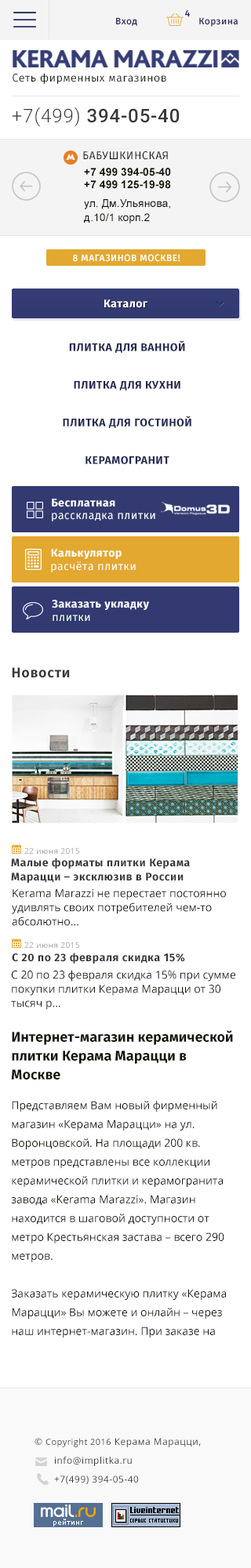
<style>
.page{position:relative;width:251px;height:1568px;background:#ffffff}
.page>*{position:absolute;margin:0}
.t1{font:9.4px "FiraSans-Medium";letter-spacing:0.04em;color:#292f60}
.t2{font:11px "FiraSans-Book";letter-spacing:0.04em;color:#151408}
.t3{font:18.8px "Roboto-Medium";letter-spacing:0.04em;color:#383838;text-transform:uppercase}
.t4{font:18.8px "Roboto-Light";letter-spacing:0.04em;color:#383838;text-transform:uppercase}
.t5{font:11px "FiraSans-Regular";letter-spacing:0.04em;color:#151408;text-transform:uppercase}
.t6{font:11px/8.5px "Arial-BoldMT";color:#151408;text-transform:uppercase}
.t7{font:11px/12.5px "Arial-BoldMT";color:#151408;text-transform:uppercase}
.t8{font:11px/18.8px "ArialMT";color:#151408}
.t9{font:11px/14.1px "ArialMT";color:#151408}
.t10{font:9.4px "FiraSans-Medium";letter-spacing:0.04em;color:#ffffff;text-transform:uppercase}
.t11{font:11px "FiraSans-Bold";letter-spacing:0.04em;color:#ffffff}
.t12{font:11px/37.6px "FiraSans-Bold";letter-spacing:0.04em;color:#222750;text-transform:uppercase}
.t13{font:11px "FiraSans-Regular";letter-spacing:0.04em;color:#ffffff}
.t14{font:14.1px "FiraSans-Bold";letter-spacing:0.04em;color:#383838}
.t15{font:11px/14.1px "FiraSans-Bold";letter-spacing:0.04em;color:#383838}
.t16{font:7.8px "OpenSans";letter-spacing:0.04em;color:#a0a2a2}
.t17{font:11px/14.1px "OpenSans";color:#151408}
.t18{font:11px "FiraSans-Bold";letter-spacing:0.04em;color:#383838}
.t19{font:11px/18.8px "OpenSans";color:#151408}
.t20{font:14.1px/18.8px "FiraSans-Bold";color:#151408}
.t21{font:9.4px "OpenSans";letter-spacing:0.04em;color:#383838}
.t22{font:8.6px "OpenSans";letter-spacing:0.04em;color:#383838}
.t23{font:9.4px/18.8px "OpenSans";letter-spacing:0.04em;color:#383838}
</style>
<div class="page">
<p class="t1" style="left:116px;top:17px;width:21px;height:9px">Вход</p>
<p class="t1" style="left:185px;top:9px;width:5px;height:7px">4</p>
<p class="t1" style="left:199px;top:17px;width:39px;height:10px">Корзина</p>
<p class="t2" style="left:13px;top:73px;width:153px;height:11px">Сеть фирменных магазинов</p>
<p class="t3" style="left:12px;top:107px;width:168px;height:20px"><span class="t4">+7(499) </span>394-05-40</p>
<p class="t5" style="left:83px;top:151px;width:85px;height:9px">БАБУШКИНСКАЯ</p>
<p class="t6" style="left:84px;top:168px;width:87px;height:55px">+7 499 394-05-40 <br><span class="t7">+7 499 125-19-98<br></span><span class="t8">ул. Дм.Ульянова, <br></span><span class="t9">д.10/1 корп.2</span></p>
<p class="t10" style="left:73px;top:254px;width:107px;height:8px">8 магазинов Москве!</p>
<p class="t11" style="left:104px;top:299px;width:43px;height:9px">Каталог</p>
<p class="t12" style="left:63px;top:340px;width:128px;height:124px;text-align:center">Плитка для ванной           <br>Плитка для кухни           <br>Плитка для гостиной<br>Керамогранит</p>
<p class="t11" style="left:52px;top:499px;width:63px;height:8px">Бесплатная</p>
<p class="t13" style="left:52px;top:513px;width:103px;height:8px">расскладка плитки</p>
<p class="t11" style="left:51px;top:549px;width:71px;height:10px">Калькулятор</p>
<p class="t13" style="left:51px;top:561px;width:85px;height:11px">расчёта плитки</p>
<p class="t11" style="left:52px;top:600px;width:97px;height:10px">Заказать укладку</p>
<p class="t13" style="left:53px;top:615px;width:37px;height:7px">плитки</p>
<p class="t14" style="left:12px;top:667px;width:58px;height:11px">Новости</p>
<p class="t15" style="left:11px;top:858px;width:179px;height:25px">Малые форматы плитки Керама <br>Марацци – эксклюзив в России</p>
<p class="t16" style="left:24px;top:848px;width:55px;height:6px">22 июня 2015</p>
<p class="t17" style="left:12px;top:889px;width:214px;height:37px">Kerama Marazzi не перестает постоянно удивлять своих потребителей чем-то абсолютно...</p>
<p class="t16" style="left:24px;top:942px;width:55px;height:6px">22 июня 2015</p>
<p class="t18" style="left:12px;top:953px;width:173px;height:11px">С 20 по 23 февраля скидка 15%</p>
<p class="t17" style="left:11px;top:970px;width:224px;height:40px">С 20 по 23 февраля скидка 15% при сумме покупки плитки Керама Марацци от 30 тысяч р...</p>
<p class="t19" style="left:11px;top:1030px;width:222px;height:308px"><span class="t20">Интернет-магазин керамической плитки Керама Марацци в Москве<br><br></span>Представляем Вам новый фирменный магазин «Керама Марацци» на ул. Воронцовской. На площади 200 кв. метров представлены все коллекции керамической плитки и керамогранита завода «Kerama Marazzi». Магазин находится в шаговой доступности от метро Крестьянская застава – всего 290 метров.<br><br>Заказать керамическую плитку «Керама Марацци» Вы можете и онлайн – через наш интернет-магазин. При заказе на сумму от 35000р. доставка по Москве будет бесплатной для Вас.</p>
<p class="t21" style="left:34px;top:1438px;width:167px;height:9px">© <span class="t22">Copyright 2016</span> Керама Марацци,</p>
<p class="t23" style="left:54px;top:1457px;width:85px;height:27px">info@implitka.ru<br>+7(499) 394-05-40</p>
</div>
